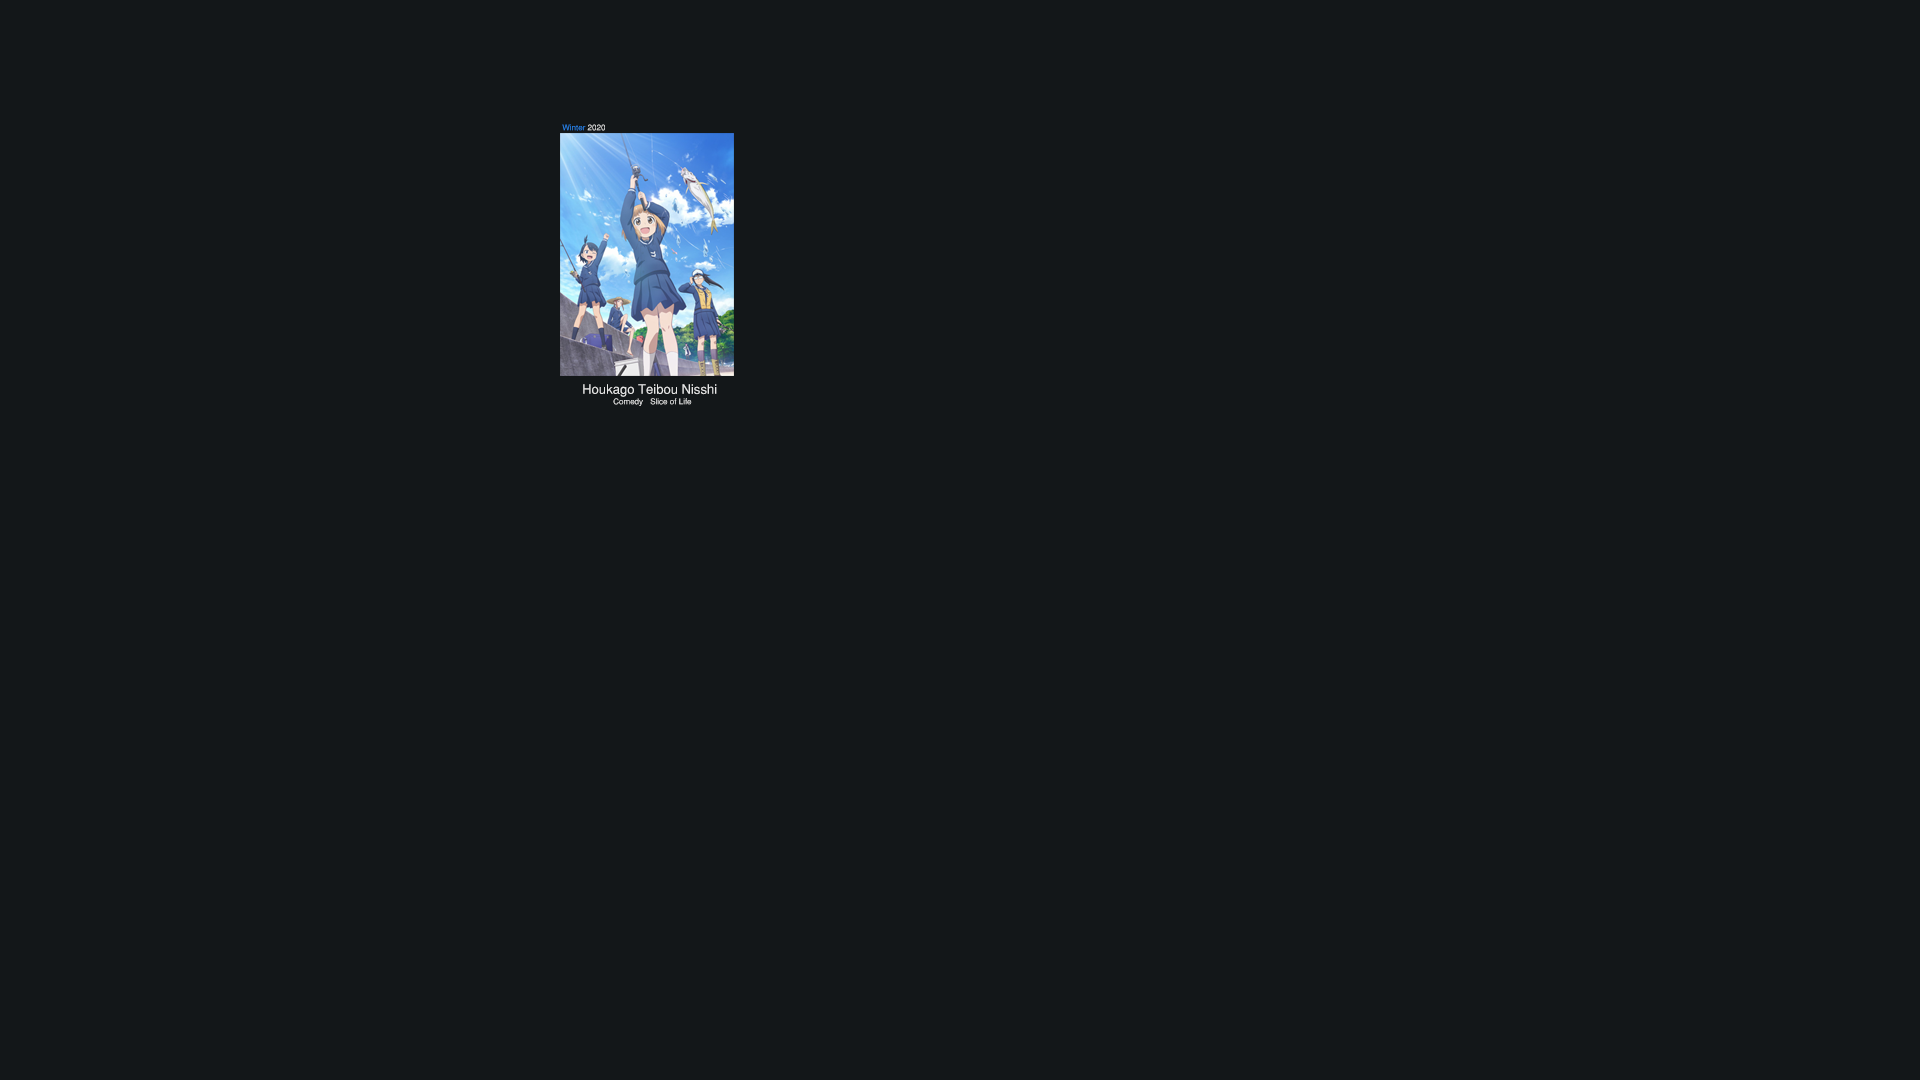
<style>
.page{position:relative;width:1920px;height:1080px;background:#131719}
.page>*{position:absolute;margin:0}
.t1{font:8px "Helvetica-Normal";color:#2b8fff}
.t2{font:8px "Helvetica-Normal";color:#ffffff}
.t3{font:13px "Helvetica-Normal";color:#ffffff}
.t4{font:8px "Helvetica-Normal"}
</style>
<div class="page">
<p class="t1" style="left:562px;top:124px;width:43px;height:7px;opacity:0.85">Winter<span class="t2"> 2020</span></p>
<p class="t3" style="left:583px;top:384px;width:134px;height:13px;opacity:0.85">Houkago Teibou Nisshi</p>
<p class="t4" style="left:613px;top:398px;width:30px;height:8px">Comedy</p>
<p class="t4" style="left:650px;top:398px;width:42px;height:7px">Slice of Life</p>
</div>
